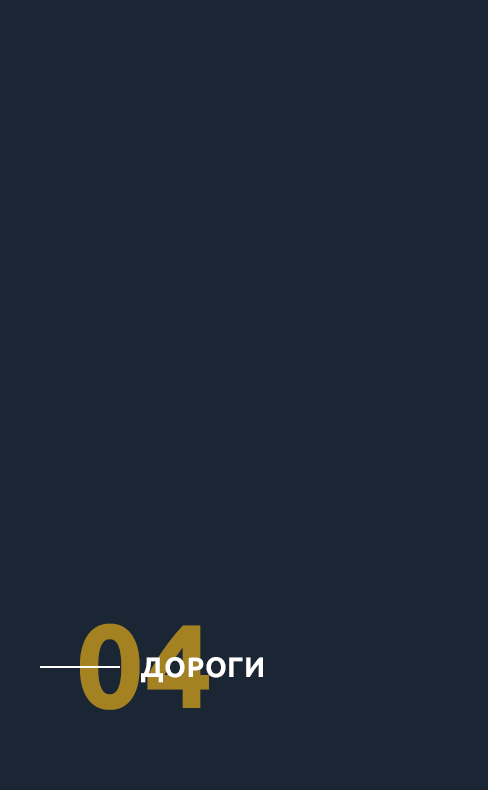
<style>
.page{position:relative;width:488px;height:790px;background:#1a2634}
.page>*{position:absolute;margin:0}
.t1{font:119px "Ubuntu-Bold";letter-spacing:0.012em;color:#a48121;text-transform:uppercase}
.t2{font:28px "Ubuntu-Bold";letter-spacing:0.012em;color:#ffffff;text-transform:uppercase}
</style>
<div class="page">
<p class="t1" style="left:80px;top:623px;width:129px;height:87px">04</p>
<p class="t2" style="left:141px;top:657px;width:122px;height:26px">дороги</p>
</div>
